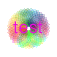
<style>
.page{position:relative;width:57px;height:57px;background:#ffffff}
.page>*{position:absolute;margin:0}
.t1{font:18px "KannadaSangamMN";color:#ec0ddf}
</style>
<div class="page">
<p class="t1" style="left:13px;top:21px;width:29px;height:13px">test</p>
</div>
